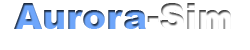
<style>
.page{position:relative;width:250px;height:50px;background:#ffffff}
.page>*{position:absolute;margin:0}
.t1{font:36px "Arial-Black";color:#6ea6fb}
.t2{font:36px "Arial-Black";color:#ffffff}
</style>
<div class="page">
<p class="t1" style="left:14px;top:3px;width:217px;height:26px">Aurora<span class="t2">-Sim</span></p>
</div>
